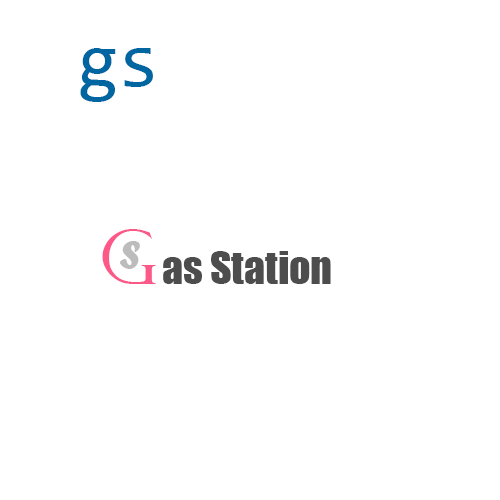
<style>
.page{position:relative;width:500px;height:500px;background:#ffffff}
.page>*{position:absolute;margin:0}
.t1{font:75px "Consolas";color:#0066a2}
.t2{font:75px "FelixTitlingMT";color:#fc5989}
.t3{font:41.7px "ForteMT";color:#bcbcbc}
.t4{font:41.7px "Impact";color:#4d4d4d}
</style>
<div class="page">
<p class="t1" style="left:80px;top:48px;width:73px;height:54px">gs</p>
<p class="t2" style="left:102px;top:229px;width:54px;height:55px">G</p>
<p class="t3" style="left:120px;top:241px;width:20px;height:28px">S</p>
<p class="t4" style="left:163px;top:251px;width:168px;height:33px">as Station</p>
</div>
